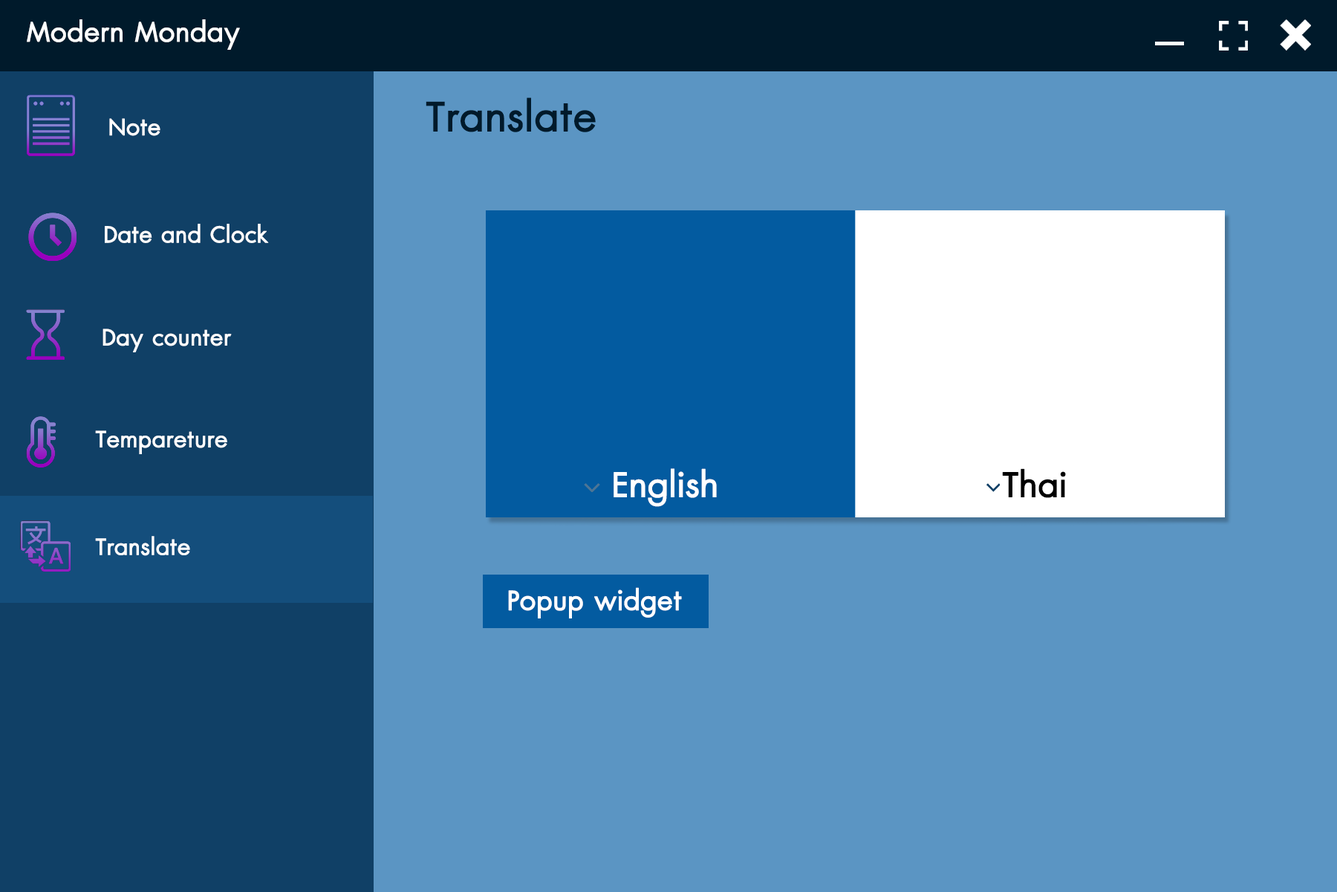
<style>
.page{position:relative;width:1337px;height:892px;background:#5b95c3}
.page>*{position:absolute;margin:0}
.t1{font:37.2px "DBAdmanX";color:#ffffff;font-weight:bold}
.t2{font:55.7px "DBAdmanX";color:#001a2b;font-weight:bold}
.t3{font:31px "DBAdmanX";color:#ffffff;font-weight:bold}
.t4{font:46.8px "DBAdmanX";color:#ffffff;font-weight:bold}
.t5{font:46.8px "DBAdmanX";color:#010101;font-weight:bold}
.t6{font:36.8px "DBAdmanX";color:#ffffff;font-weight:bold}
</style>
<div class="page">
<p class="t1" style="left:27px;top:19px;width:213px;height:31px">Modern Monday</p>
<p class="t2" style="left:426px;top:97px;width:170px;height:35px">Translate</p>
<p class="t3" style="left:109px;top:118px;width:51px;height:18px">Note</p>
<p class="t3" style="left:105px;top:224px;width:164px;height:19px">Date and Clock</p>
<p class="t3" style="left:103px;top:328px;width:129px;height:24px">Day counter</p>
<p class="t3" style="left:95px;top:430px;width:132px;height:24px">Tempareture</p>
<p class="t4" style="left:614px;top:468px;width:103px;height:39px">English</p>
<p class="t5" style="left:1002px;top:468px;width:64px;height:30px">Thai</p>
<p class="t3" style="left:95px;top:536px;width:95px;height:20px">Translate</p>
<p class="t6" style="left:508px;top:587px;width:174px;height:31px">Popup widget</p>
</div>
